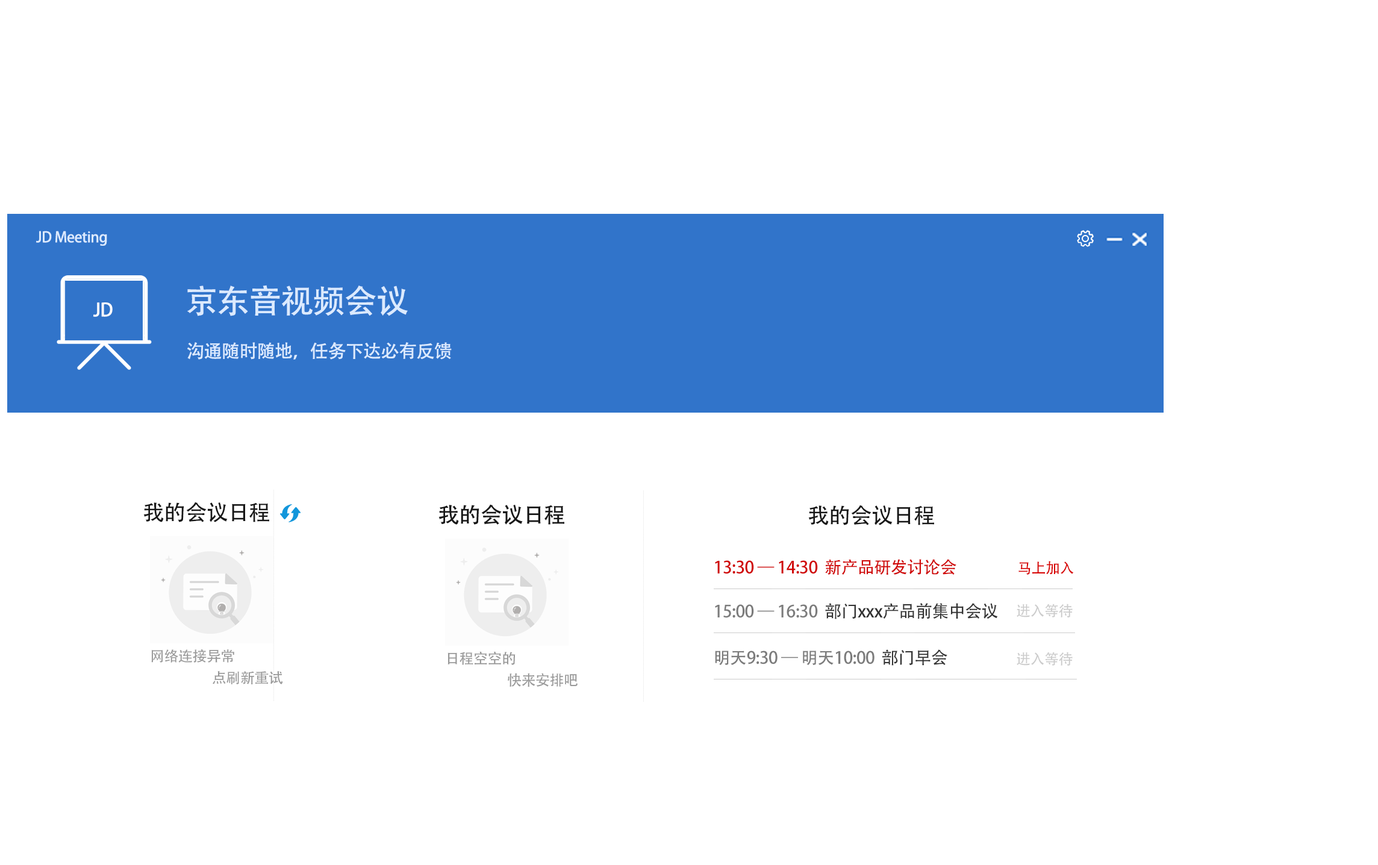
<style>
.page{position:relative;width:1378px;height:865px;background:#ffffff}
.page>*{position:absolute;margin:0}
.t1{font:14.5px "AdobeHeitiStd-Regular";letter-spacing:-0.02em;color:#dbeaff}
.t2{font:32.5px "AdobeHeitiStd-Regular";letter-spacing:-0.02em;color:#dbeaff}
.t3{font:18.1px "AdobeHeitiStd-Regular";letter-spacing:-0.02em;color:#fefefe}
.t4{font:18.1px "AdobeHeitiStd-Regular";letter-spacing:-0.02em;color:#dbeaff}
.t5{font:21.7px "AdobeHeitiStd-Regular";letter-spacing:-0.02em;color:#171717}
.t6{font:16.9px "AdobeHeitiStd-Regular";letter-spacing:-0.02em;color:#d00707}
.t7{font:14.5px "AdobeHeitiStd-Regular";letter-spacing:-0.02em;color:#d80303}
.t8{font:16.9px "AdobeHeitiStd-Regular";letter-spacing:-0.02em;color:#7c7c7c}
.t9{font:16.9px "AdobeHeitiStd-Regular";letter-spacing:-0.02em;color:#333333}
.t10{font:14.5px "AdobeHeitiStd-Regular";letter-spacing:-0.02em;color:#cccccc}
.t11{font:14.5px/5.4px "AdobeHeitiStd-Regular";letter-spacing:-0.02em;color:#999999}
</style>
<div class="page">
<p class="t1" style="left:36px;top:231px;width:71px;height:15px">JD Meeting</p>
<p class="t2" style="left:187px;top:285px;width:221px;height:31px">京东音视频会议</p>
<p class="t3" style="left:93px;top:302px;width:20px;height:15px">JD</p>
<p class="t4" style="left:187px;top:342px;width:265px;height:18px">沟通随时随地，任务下达必有反馈</p>
<p class="t5" style="left:143px;top:502px;width:126px;height:20px">我的会议日程</p>
<p class="t5" style="left:439px;top:504px;width:125px;height:21px">我的会议日程</p>
<p class="t5" style="left:808px;top:505px;width:126px;height:20px">我的会议日程</p>
<p class="t6" style="left:715px;top:559px;width:242px;height:16px">13:30 — 14:30  新产品研发讨论会</p>
<p class="t7" style="left:1019px;top:561px;width:55px;height:14px">马上加入</p>
<p class="t8" style="left:715px;top:603px;width:283px;height:16px">15:00 — 16:30  <span class="t9">部门xxx产品前集中会议</span></p>
<p class="t10" style="left:1017px;top:604px;width:56px;height:13px">进入等待</p>
<p class="t11" style="left:151px;top:649px;width:132px;height:35px">网络连接异常          <br>   <br>        <br>                        <br>                     点刷新重试</p>
<p class="t11" style="left:448px;top:651px;width:130px;height:36px">日程空空的　          <br>   <br>        <br>                        <br>                     快来安排吧</p>
<p class="t8" style="left:715px;top:649px;width:233px;height:17px">明天9:30 — 明天10:00  <span class="t9">部门早会</span></p>
<p class="t10" style="left:1017px;top:652px;width:56px;height:14px">进入等待</p>
</div>
